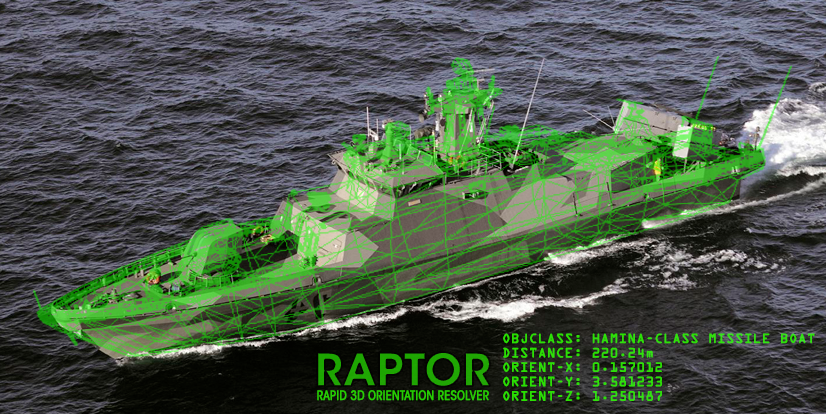
<style>
.page{position:relative;width:826px;height:414px}
.page>*{position:absolute;margin:0}
.t1{font:12px "OCRAStd";color:#2de006;font-weight:bold}
.t2{font:43.4px "ITCAvantGardeStd-Demi";color:#1da502;font-weight:bold}
.t3{font:12.5px "ITCAvantGardeStd-BkCn";color:#26cd03;font-weight:bold}
</style>
<div class="page">
<p class="t1" style="left:503px;top:333px;width:312px;height:68px">OBJCLASS: HAMINA-CLASS MISSILE BOAT<br>DISTANCE: 220.24m<br>ORIENT-X: 0.157012<br>ORIENT-Y: 3.581233<br>ORIENT-Z: 1.250487</p>
<p class="t2" style="left:317px;top:352px;width:173px;height:35px">RAPTOR</p>
<p class="t3" style="left:317px;top:390px;width:172px;height:11px">RAPID 3D ORIENTATION RESOLVER</p>
</div>
